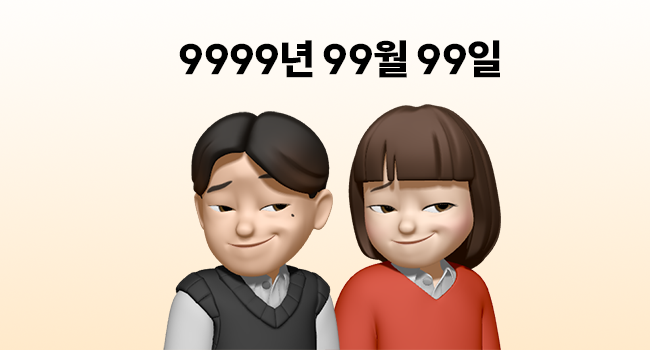
<style>
.page{position:relative;width:650px;height:350px}
.page>*{position:absolute;margin:0}
.t1{font:41.1px "SUIT-Heavy";letter-spacing:-0.025em;color:#000000}
</style>
<div class="page">
<p class="t1" style="left:179px;top:40px;width:321px;height:38px">9999년 99월 99일</p>
</div>
